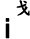
<style>
.page{position:relative;width:30px;height:39px;background:#ffffff}
.page>*{position:absolute;margin:0}
.t1{font:18px "DFKaiShu-SB-Estd-BF";color:#000000;font-weight:bold}
.t2{font:27px "ArialMT";color:#000000;font-weight:bold}
</style>
<div class="page">
<p class="t1" style="left:16px;top:0px;width:14px;height:16px">戈</p>
<p class="t2" style="left:5px;top:18px;width:5px;height:21px">i</p>
</div>
